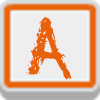
<style>
.page{position:relative;width:100px;height:100px;background:#eeeeee}
.page>*{position:absolute;margin:0}
.t1{font:84.8px "EraserDust";color:#e8620a}
</style>
<div class="page">
<p class="t1" style="left:26px;top:17px;width:46px;height:63px">A</p>
</div>
